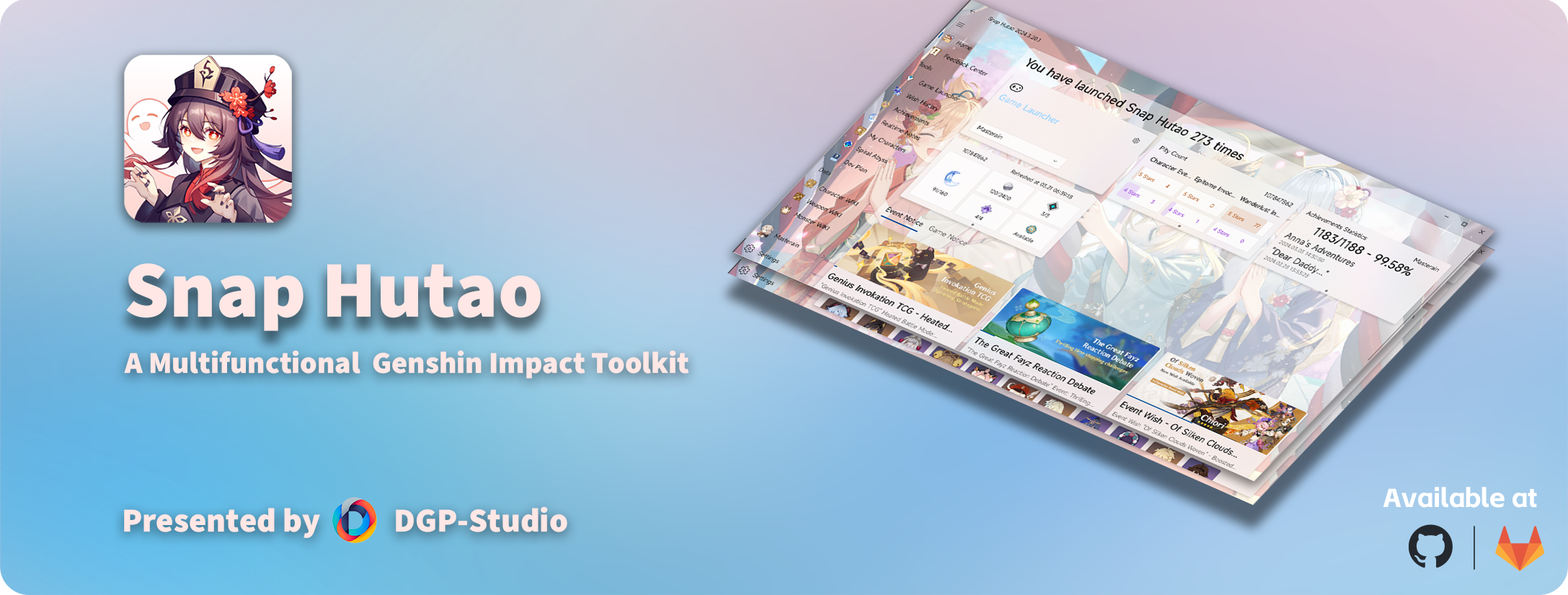
<style>
.page{position:relative;width:1568px;height:595px}
.page>*{position:absolute;margin:0}
.t1{font:80.3px "SourceSansRoman-Black";color:#ffe7e5}
.t2{font:30.3px "SourceSansRoman-Black";color:#ffe7e5}
.t3{font:26px "AlimamaShuHeiTi-Bold";color:#ffffff}
.t4{font:33.5px "SourceSansRoman-Black";color:#ffe7e5}
.t5{font:45px "AlimamaAgileVF-Thin"}
</style>
<div class="page">
<p class="t1" style="left:126px;top:263px;width:415px;height:68px">Snap Hutao</p>
<p class="t2" style="left:124px;top:350px;width:565px;height:28px">A Multifunctional  Genshin Impact Toolkit</p>
<p class="t3" style="left:1383px;top:487px;width:154px;height:21px">Available at</p>
<p class="t4" style="left:124px;top:506px;width:443px;height:32px">Presented by           DGP-Studio</p>
<p class="t5" style="left:1474px;top:526px;width:1px;height:44px">|</p>
</div>
